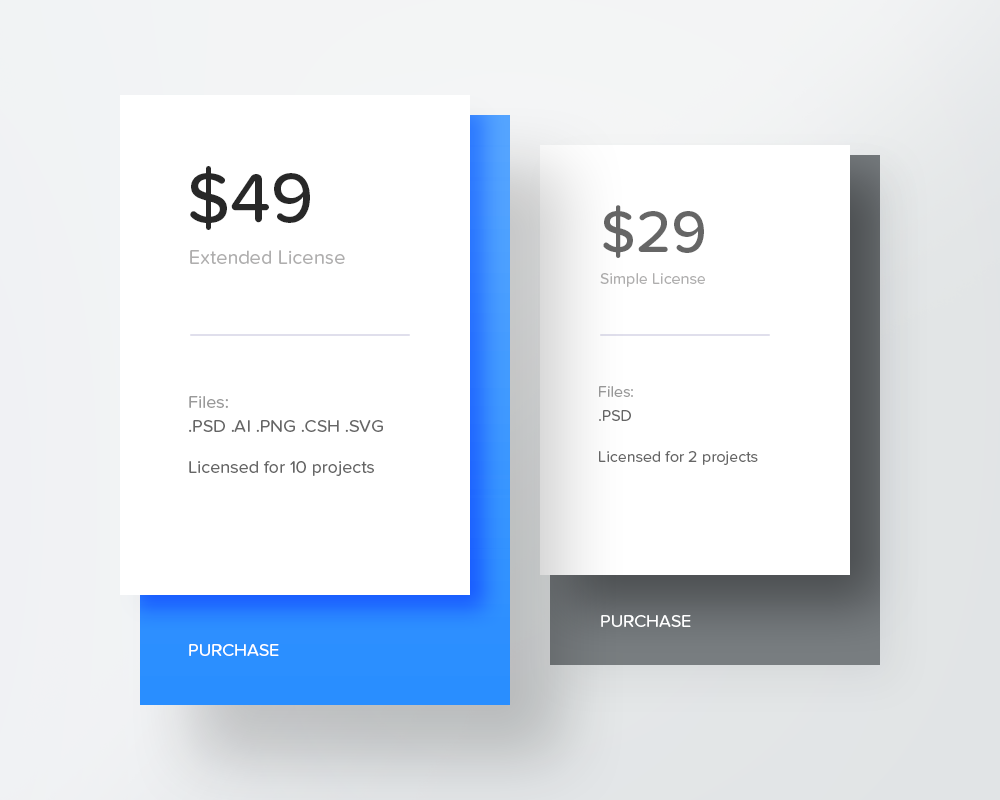
<style>
.page{position:relative;width:1000px;height:800px;background:#ffffff}
.page>*{position:absolute;margin:0}
.t1{font:72px "ProximaNovaSoft-Medium";color:#282828}
.t2{font:60px "ProximaNovaSoft-Medium";color:#666666}
.t3{font:20px "ProximaNovaSoft-Regular";color:#afaeae}
.t4{font:16px "ProximaNovaSoft-Regular";color:#afaeae}
.t5{font:16px/24px "ProximaNovaSoft-Regular";color:#999999}
.t6{font:16px/24px "ProximaNovaSoft-Regular";color:#666666}
.t7{font:18px/24px "ProximaNovaSoft-Regular";color:#666666}
.t8{font:18px/24px "ProximaNovaSoft-Regular";color:#999999}
.t9{font:18px "ProximaNovaSoft-Regular";color:#666666}
.t10{font:16px "ProximaNovaSoft-Regular";color:#666666}
.t11{font:18px "ProximaNovaSoft-Regular";color:#ffffff;text-transform:uppercase}
</style>
<div class="page">
<p class="t1" style="left:190px;top:166px;width:120px;height:64px">$49</p>
<p class="t2" style="left:603px;top:205px;width:101px;height:53px">$29</p>
<p class="t3" style="left:190px;top:250px;width:155px;height:14px">Extended License</p>
<p class="t4" style="left:600px;top:273px;width:105px;height:14px">Simple License</p>
<p class="t5" style="left:599px;top:386px;width:34px;height:35px">Files: <br><span class="t6">.PSD</span></p>
<p class="t7" style="left:189px;top:396px;width:194px;height:36px"><span class="t8">Files: <br></span>.PSD .AI .PNG .CSH .SVG</p>
<p class="t9" style="left:189px;top:460px;width:185px;height:16px">Licensed for 10 projects</p>
<p class="t10" style="left:599px;top:451px;width:159px;height:14px">Licensed for 2 projects</p>
<p class="t11" style="left:601px;top:615px;width:90px;height:12px">Purchase</p>
<p class="t11" style="left:189px;top:644px;width:90px;height:12px">Purchase</p>
</div>
